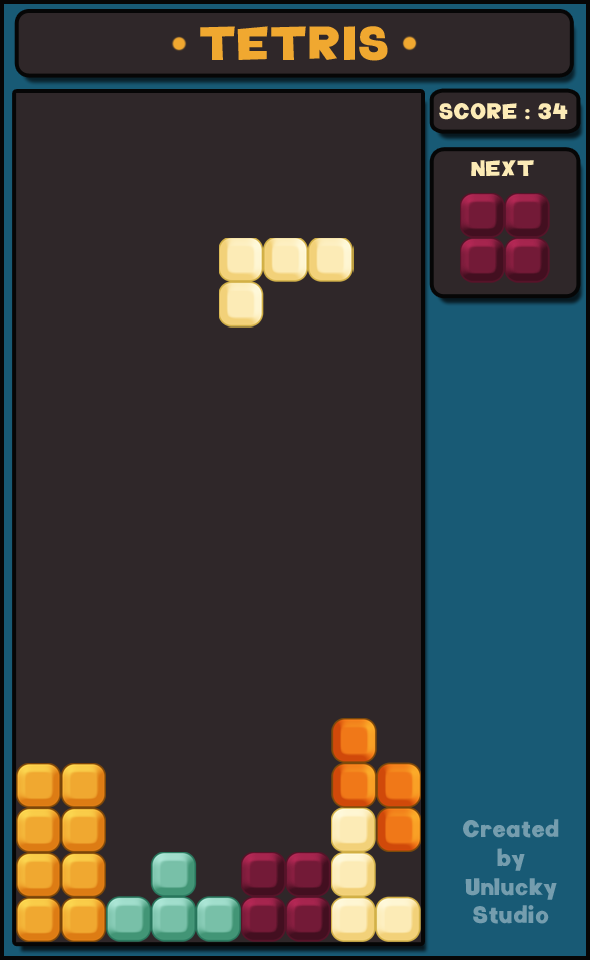
<style>
.page{position:relative;width:590px;height:960px;background:#2f2729}
.page>*{position:absolute;margin:0}
.t1{font:48px "TeletoonLowercase";letter-spacing:0.025em;color:#f0a830}
.t2{font:22.5px "TeletoonLowercase";letter-spacing:0.025em;color:#fcebb6}
.t3{font:24px "TeletoonLowercase";letter-spacing:0.025em;color:#759dae}
</style>
<div class="page">
<p class="t1" style="left:200px;top:26px;width:188px;height:35px">TETRIS</p>
<p class="t2" style="left:439px;top:103px;width:129px;height:17px">SCORE : 34</p>
<p class="t2" style="left:471px;top:160px;width:63px;height:16px">NEXT</p>
<p class="t3" style="left:463px;top:819px;width:96px;height:105px;text-align:center">Created<br>by<br>Unlucky<br>Studio</p>
</div>
